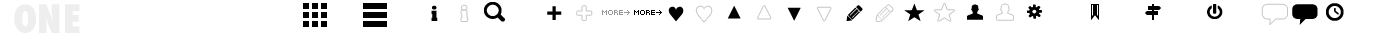
<style>
.page{position:relative;width:1400px;height:40px;background:#ffffff}
.page>*{position:absolute;margin:0}
.t1{font:38px "Futura-CondensedExtraBold";color:#eeeeee}
.t2{font:22px "Rockwell-ExtraBold";letter-spacing:0.016em;color:#000000;scale:0.8 1}
.t3{font:22px "Rockwell-ExtraBold";letter-spacing:0.016em;color:#ffffff;scale:0.8 1}
.t4{font:25px "Rockwell-ExtraBold";letter-spacing:0.016em;color:#000000}
.t5{font:24px "Menlo-Regular";letter-spacing:0.016em;color:#000000}
.t6{font:24px "Menlo-Regular";letter-spacing:0.016em;color:#ffffff}
.t7{font:21px "Menlo-Regular";letter-spacing:0.016em;color:#000000}
.t8{font:8px "FrucadeMedium";color:#979797}
.t9{font:8px "FrucadeMedium";color:#000000}
</style>
<div class="page">
<p class="t1" style="left:14px;top:4px;width:66px;height:29px">ONE</p>
<p class="t2" style="left:431px;top:5px;width:7px;height:16px">i</p>
<p class="t3" style="left:461px;top:5px;width:7px;height:16px">i</p>
<p class="t4" style="left:547px;top:6px;width:15px;height:14px">+</p>
<p class="t5" style="left:668px;top:6px;width:16px;height:16px">♥</p>
<p class="t6" style="left:696px;top:6px;width:16px;height:16px">♥</p>
<p class="t7" style="left:727px;top:5px;width:14px;height:14px">▲</p>
<p class="t8" style="left:602px;top:10px;width:21px;height:5px">more</p>
<p class="t9" style="left:634px;top:10px;width:21px;height:5px">more</p>
<p class="t7" style="left:787px;top:7px;width:14px;height:14px">▼</p>
</div>
